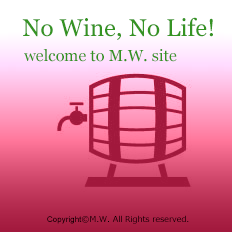
<style>
.page{position:relative;width:232px;height:232px}
.page>*{position:absolute;margin:0}
.t1{font:24px "Georgia";letter-spacing:0.004em;color:#359323}
.t2{font:16px "Georgia";letter-spacing:0.004em;color:#359323}
.t3{font:8px "Meiryo";letter-spacing:0.004em;color:#000000}
.t4{font:8px "ArialMT";letter-spacing:0.004em;color:#000000}
</style>
<div class="page">
<p class="t1" style="left:22px;top:17px;width:191px;height:23px">No Wine, No Life!</p>
<p class="t2" style="left:24px;top:49px;width:153px;height:13px">welcome to M.W. site</p>
<p class="t3" style="left:47px;top:215px;width:142px;height:9px"><span class="t4">Copyright</span>©M.W. All Rights reserved.</p>
</div>
